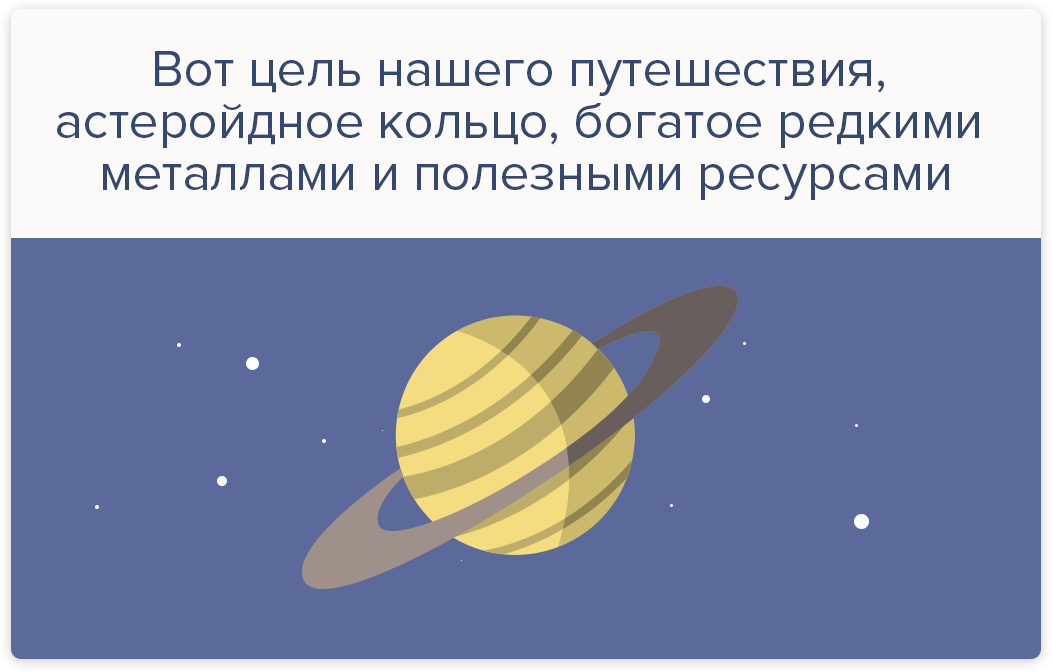
<style>
.page{position:relative;width:1052px;height:672px;background:#5c6a9b}
.page>*{position:absolute;margin:0}
.t1{font:52px/52px "ProximaNova-Regular";color:#344870}
</style>
<div class="page">
<p class="t1" style="left:57px;top:51px;width:922px;height:149px;text-align:center">Вот цель нашего путешествия, <br>астеройдное кольцо, богатое редкими <br>металлами и полезными ресурсами</p>
</div>
